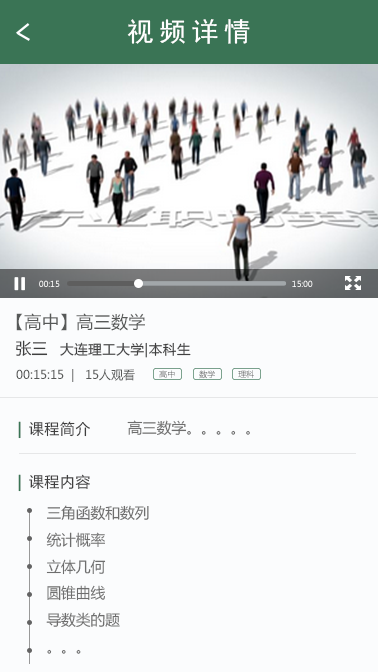
<style>
.page{position:relative;width:378px;height:672px;background:#fbfcfd}
.page>*{position:absolute;margin:0}
.t1{font:26.7px "SimHei";letter-spacing:0.2em;color:#ffffff}
.t2{font:8px "MicrosoftYaHei"}
.t3{font:17.3px "MicrosoftYaHei";color:#575958}
.t4{font:13.3px "MicrosoftYaHei";letter-spacing:0.05em;color:#3f3f3f}
.t5{font:16px "MicrosoftYaHei";color:#3f3f3f}
.t6{font:12px "MicrosoftYaHei";color:#575958}
.t7{font:14.7px "MicrosoftYaHei";letter-spacing:0.05em;color:#3f3f3f}
.t8{font:14.7px "MicrosoftYaHei";letter-spacing:0.1em;color:#3a7455;font-weight:bold}
.t9{font:14.7px "MicrosoftYaHei";color:#6e6e6e}
.t10{font:14.7px/13.3px "MicrosoftYaHei";color:#6e6e6e}
</style>
<div class="page">
<p class="t1" style="left:127px;top:19px;width:123px;height:25px">视频详情</p>
<p class="t2" style="left:39px;top:280px;width:21px;height:7px">00:15</p>
<p class="t2" style="left:292px;top:280px;width:21px;height:7px">15:00</p>
<p class="t3" style="left:16px;top:313px;width:129px;height:18px">【高中】高三数学</p>
<p class="t4" style="left:16px;top:340px;width:175px;height:18px"><span class="t5">张三   </span>大连理工大学|本科生</p>
<p class="t6" style="left:16px;top:369px;width:119px;height:13px">00:15:15  |   15人观看</p>
<p class="t2" style="left:159px;top:370px;width:16px;height:8px">高中</p>
<p class="t2" style="left:199px;top:370px;width:16px;height:9px">数学</p>
<p class="t2" style="left:238px;top:370px;width:16px;height:8px">理科</p>
<p class="t7" style="left:18px;top:421px;width:72px;height:18px"><span class="t8">| </span>课程简介</p>
<p class="t9" style="left:127px;top:420px;width:123px;height:15px">高三数学。。。。。</p>
<p class="t7" style="left:18px;top:474px;width:72px;height:18px"><span class="t8">| </span>课程内容</p>
<p class="t10" style="left:46px;top:505px;width:103px;height:149px">三角函数和数列<br><br>统计概率<br><br>立体几何<br><br>圆锥曲线<br><br>导数类的题<br><br>。。。</p>
</div>
